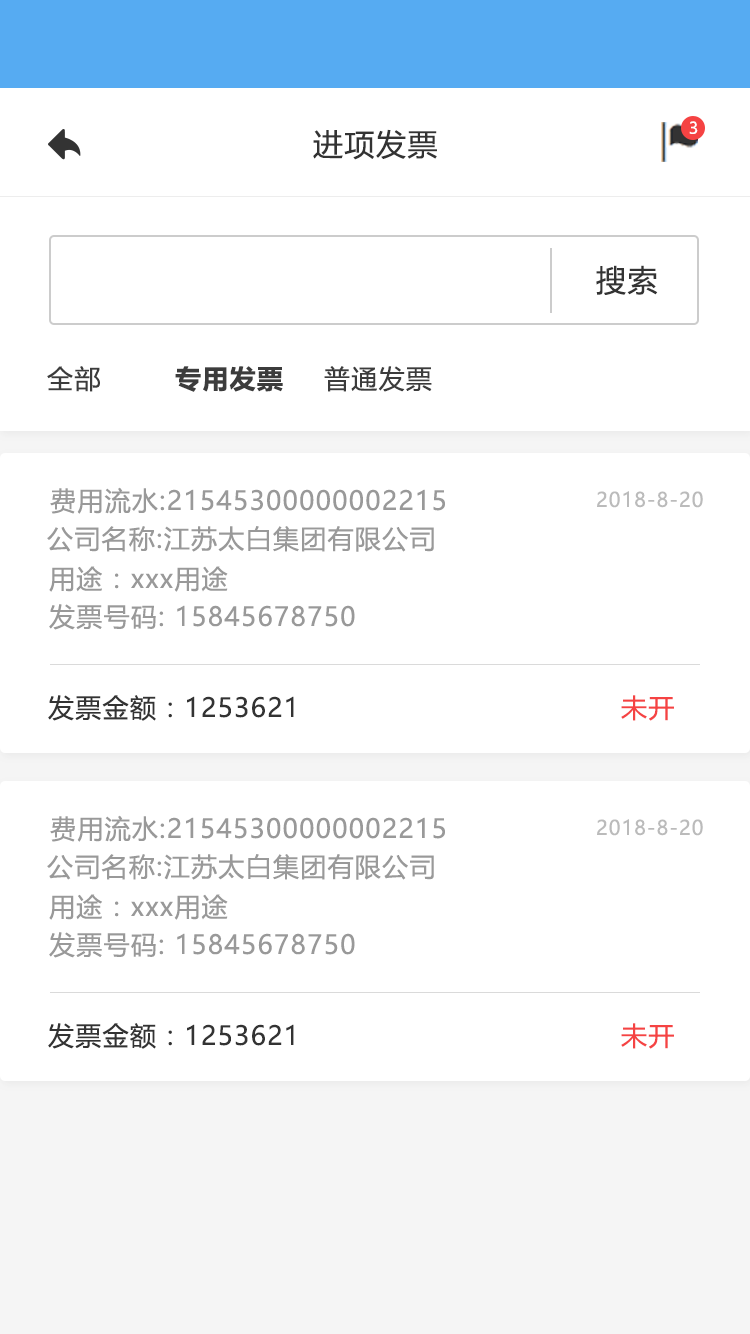
<style>
.page{position:relative;width:750px;height:1334px;background:#ffffff}
.page>*{position:absolute;margin:0}
.t1{font:16px "MicrosoftYaHeiUI";color:#ffffff}
.t2{font:30px "MicrosoftYaHeiUI";letter-spacing:0.05em;color:#333333}
.t3{font:26px "MicrosoftYaHeiUI";letter-spacing:0.05em;color:#3c3c3c}
.t4{font:26px "MicrosoftYaHeiUI-Bold";letter-spacing:0.05em;color:#3c3c3c}
.t5{font:26px "MicrosoftYaHeiUI";letter-spacing:0.05em;color:#999999}
.t6{font:20px "MicrosoftYaHeiUI";letter-spacing:0.05em;color:#bbbbbb}
.t7{font:26px "MicrosoftYaHeiUI";letter-spacing:0.05em;color:#333333}
.t8{font:26px "MicrosoftYaHeiUI";letter-spacing:0.05em;color:#f54343}
</style>
<div class="page">
<p class="t1" style="left:689px;top:121px;width:9px;height:13px">3</p>
<p class="t2" style="left:313px;top:129px;width:124px;height:31px">进项发票</p>
<p class="t2" style="left:596px;top:265px;width:62px;height:30px">搜索</p>
<p class="t3" style="left:47px;top:366px;width:53px;height:26px">全部</p>
<p class="t4" style="left:175px;top:366px;width:108px;height:26px">专用发票</p>
<p class="t3" style="left:324px;top:366px;width:108px;height:26px">普通发票</p>
<p class="t5" style="left:50px;top:487px;width:395px;height:27px">费用流水:21545300000002215</p>
<p class="t6" style="left:597px;top:491px;width:106px;height:17px">2018-8-20</p>
<p class="t5" style="left:47px;top:526px;width:387px;height:26px">公司名称:江苏太白集团有限公司</p>
<p class="t5" style="left:49px;top:566px;width:179px;height:26px">用途：xxx用途</p>
<p class="t5" style="left:49px;top:604px;width:306px;height:26px">发票号码: 15845678750</p>
<p class="t7" style="left:48px;top:695px;width:246px;height:26px">发票金额：1253621</p>
<p class="t8" style="left:621px;top:695px;width:53px;height:26px">未开</p>
<p class="t5" style="left:50px;top:815px;width:395px;height:27px">费用流水:21545300000002215</p>
<p class="t6" style="left:597px;top:819px;width:106px;height:17px">2018-8-20</p>
<p class="t5" style="left:47px;top:854px;width:387px;height:26px">公司名称:江苏太白集团有限公司</p>
<p class="t5" style="left:49px;top:894px;width:179px;height:26px">用途：xxx用途</p>
<p class="t5" style="left:49px;top:932px;width:306px;height:26px">发票号码: 15845678750</p>
<p class="t7" style="left:48px;top:1023px;width:246px;height:26px">发票金额：1253621</p>
<p class="t8" style="left:621px;top:1023px;width:53px;height:26px">未开</p>
</div>
